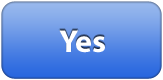
<style>
.page{position:relative;width:163px;height:80px}
.page>*{position:absolute;margin:0}
.t1{font:32px "MyriadPro-Bold";color:#ffffff}
</style>
<div class="page">
<p class="t1" style="left:59px;top:30px;width:46px;height:23px">Yes</p>
</div>
